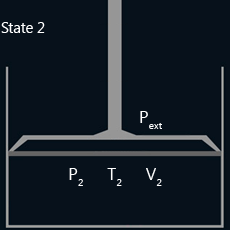
<style>
.page{position:relative;width:230px;height:230px;background:#07111b}
.page>*{position:absolute;margin:0}
.t1{font:25px "SegoeUI";color:#ffffff}
.t2{font:17.4px "SegoeUI";color:#ffffff}
</style>
<div class="page">
<p class="t1" style="left:1px;top:22px;width:44px;height:11px">State 2</p>
<p class="t2" style="left:140px;top:111px;width:22px;height:18px">Pext</p>
<p class="t2" style="left:69px;top:168px;width:93px;height:18px">P2     T2     V2</p>
</div>
